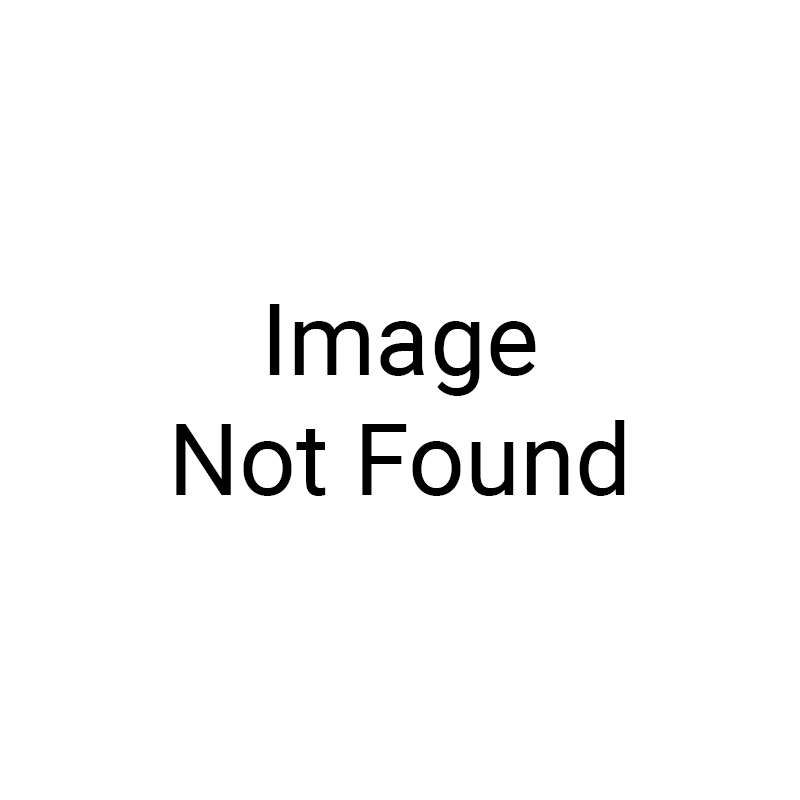
<style>
.page{position:relative;width:800px;height:800px;background:#ffffff}
.page>*{position:absolute;margin:0}
.t1{font:100px "Roboto-Regular";color:#000000}
</style>
<div class="page">
<p class="t1" style="left:176px;top:304px;width:449px;height:192px;text-align:center">Image<br>Not Found</p>
</div>
